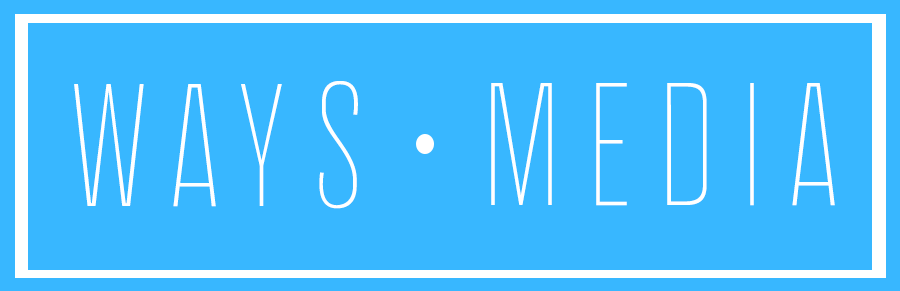
<style>
.page{position:relative;width:900px;height:291px;background:#38b7ff}
.page>*{position:absolute;margin:0}
.t1{font:179.2px "BalboaPlus-Inline";color:#ffffff}
</style>
<div class="page">
<p class="t1" style="left:74px;top:81px;width:284px;height:128px">Ways</p>
<p class="t1" style="left:491px;top:83px;width:344px;height:123px">Media</p>
</div>
